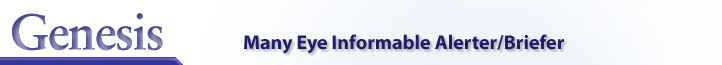
<style>
.page{position:relative;width:722px;height:65px}
.page>*{position:absolute;margin:0}
.t1{font:50px "Sabon-Bold";letter-spacing:-0.03em}
.t2{font:20px "MyriadPro-Bold";color:#1e1e6b}
</style>
<div class="page">
<p class="t1" style="left:12px;top:13px;width:151px;height:38px">Genesis</p>
<p class="t1" style="left:12px;top:13px;width:151px;height:38px">Genesis</p>
<p class="t2" style="left:244px;top:34px;width:320px;height:20px">Many Eye Informable Alerter/Briefer</p>
</div>
